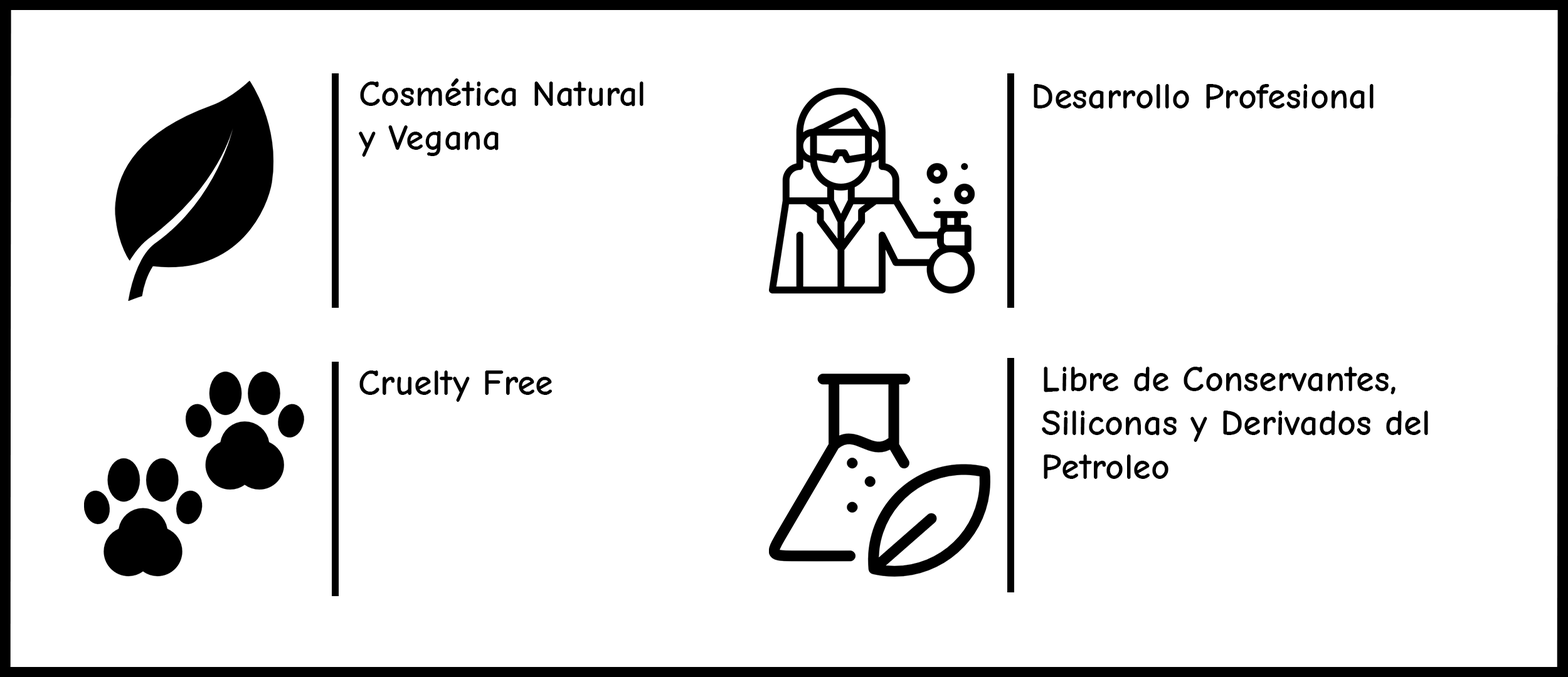
<style>
.page{position:relative;width:1568px;height:677px;background:#ffffff}
.page>*{position:absolute;margin:0}
.t1{font:36.6px "ComicNeue-Bold";color:#000000}
</style>
<div class="page">
<p class="t1" style="left:359px;top:78px;width:285px;height:79px">Cosmética Natural<br>y Vegana</p>
<p class="t1" style="left:1034px;top:84px;width:340px;height:25px">Desarrollo Profesional</p>
<p class="t1" style="left:359px;top:371px;width:193px;height:31px">Cruelty Free</p>
<p class="t1" style="left:1042px;top:367px;width:386px;height:112px">Libre de Conservantes,<br>Siliconas y Derivados del<br>Petroleo</p>
</div>
